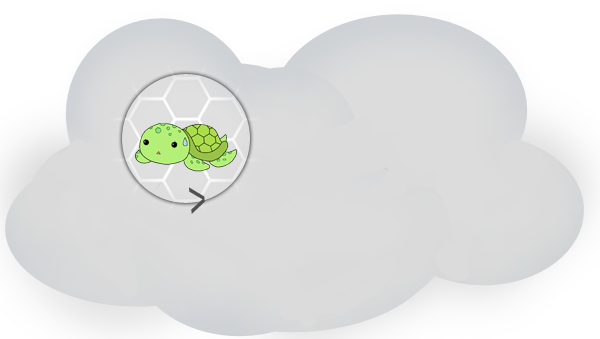
<style>
.page{position:relative;width:600px;height:339px}
.page>*{position:absolute;margin:0}
.t1{font:19.6px "Verdana";color:#515151;scale:2.07 1}
</style>
<div class="page">
<p class="t1" style="left:189px;top:187px;width:16px;height:27px;rotate:-96deg">V</p>
</div>
